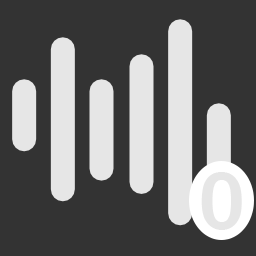
<style>
.page{position:relative;width:256px;height:256px;background:#333333}
.page>*{position:absolute;margin:0}
.t1{font:80px "ArialRoundedMTBold";letter-spacing:0.025em;color:#e6e6e6}
</style>
<div class="page">
<p class="t1" style="left:201px;top:172px;width:41px;height:58px">0</p>
</div>
